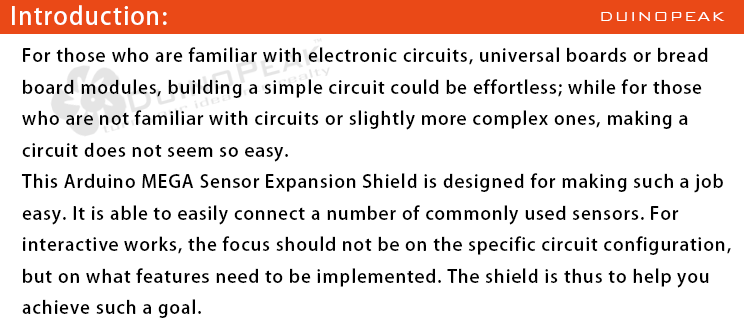
<style>
.page{position:relative;width:744px;height:336px;background:#ffffff}
.page>*{position:absolute;margin:0}
.t1{font:24px "AdobeHeitiStd-Regular";letter-spacing:0.05em;color:#ffffff}
.t2{font:18px "BankGothicBT-Light";letter-spacing:0.05em;color:#ffffff}
.t3{font:18px "AdobeHeitiStd-Regular";letter-spacing:0.05em;color:#000000}
</style>
<div class="page">
<p class="t1" style="left:12px;top:5px;width:155px;height:20px">Introduction:</p>
<p class="t2" style="left:601px;top:12px;width:124px;height:9px">DUINOPEAK</p>
<p class="t3" style="left:21px;top:47px;width:710px;height:271px">For those who are familiar with electronic circuits, universal boards or bread <br>board modules, building a simple circuit could be effortless; while for those <br>who are not familiar with circuits or slightly more complex ones, making a <br>circuit does not seem so easy.<br>This Arduino MEGA Sensor Expansion Shield is designed for making such a job <br>easy. It is able to easily connect a number of commonly used sensors. For <br>interactive works, the focus should not be on the specific circuit configuration, <br>but on what features need to be implemented. The shield is thus to help you <br>achieve such a goal.</p>
</div>
